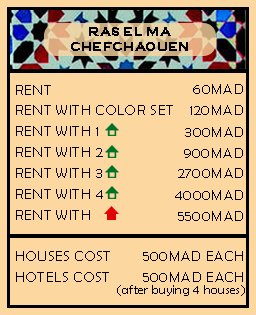
<style>
.page{position:relative;width:256px;height:315px;background:#fcd7a0}
.page>*{position:absolute;margin:0}
.t1{font:12.5px "CopperplateGothic-Bold";letter-spacing:0.025em;color:#000000}
.t2{font:14.6px/20.8px "BerlinSansFB-Reg";letter-spacing:0.025em;color:#000000}
.t3{font:14.6px "BerlinSansFB-Reg";letter-spacing:0.025em;color:#000000}
.t4{font:12.5px "BerlinSansFB-Reg";letter-spacing:0.025em;color:#000000}
</style>
<div class="page">
<p class="t1" style="left:71px;top:27px;width:117px;height:24px;text-align:center">RAS EL MA<br>CHEFCHAOUEN</p>
<p class="t2" style="left:16px;top:85px;width:157px;height:197px">RENT                                <br>RENT WITH COLOR SET    <br>RENT WITH 1                    <br>RENT WITH 2                   <br>RENT WITH 3                  <br>RENT WITH 4                 <br>RENT WITH                    <br><br>HOUSES COST      <br>HOTELS COST</p>
<p class="t3" style="left:193px;top:84px;width:50px;height:10px">60MAD</p>
<p class="t3" style="left:190px;top:105px;width:53px;height:10px">120MAD</p>
<p class="t3" style="left:185px;top:127px;width:58px;height:10px">300MAD</p>
<p class="t3" style="left:184px;top:148px;width:59px;height:10px">900MAD</p>
<p class="t3" style="left:178px;top:168px;width:65px;height:10px">2700MAD</p>
<p class="t3" style="left:175px;top:190px;width:68px;height:10px">4000MAD</p>
<p class="t3" style="left:178px;top:211px;width:65px;height:10px">5500MAD</p>
<p class="t3" style="left:143px;top:251px;width:100px;height:10px">500MAD EACH</p>
<p class="t3" style="left:143px;top:272px;width:100px;height:10px">500MAD EACH</p>
<p class="t4" style="left:117px;top:285px;width:128px;height:11px">(after buying 4 houses)</p>
</div>
